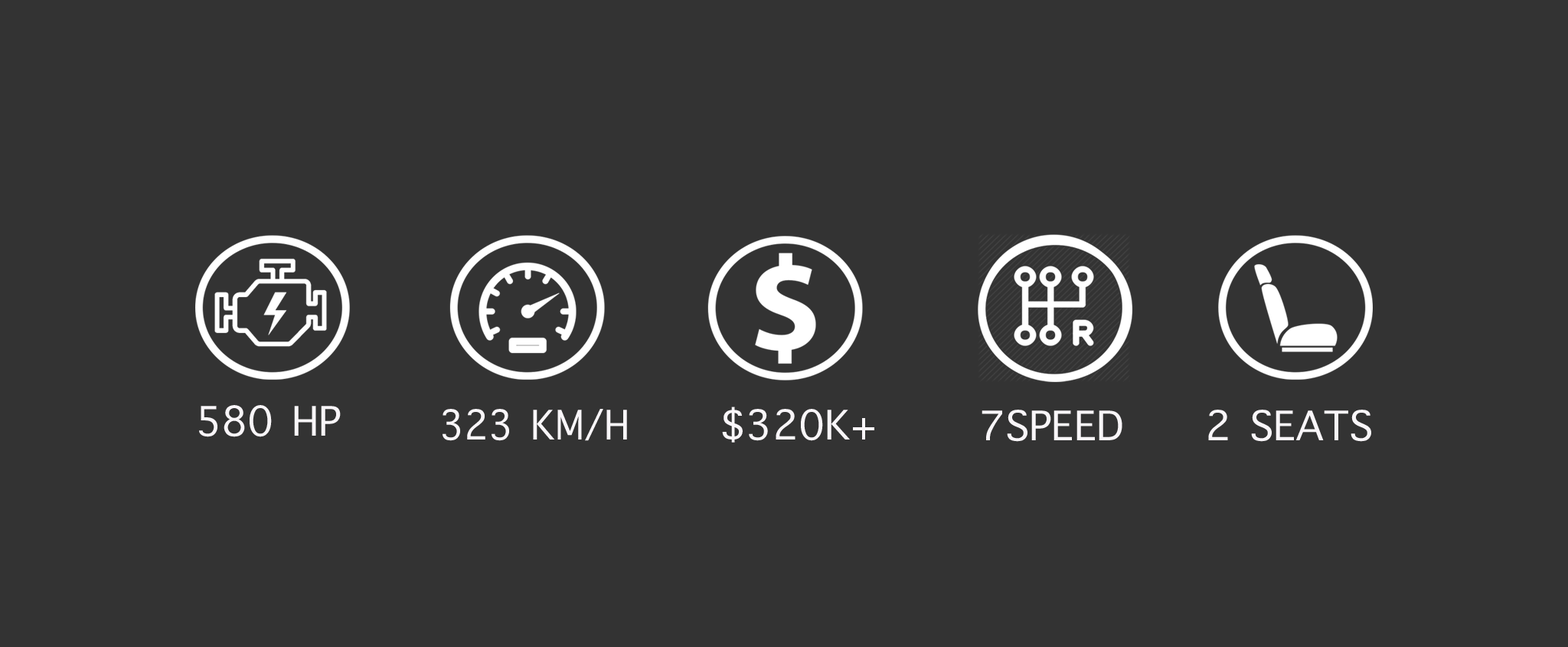
<style>
.page{position:relative;width:1568px;height:647px;background:#333333}
.page>*{position:absolute;margin:0}
.t1{font:55.1px "AppleSymbols";color:#f9f6f9}
.t2{font:55.1px "AppleSymbols";color:#f9f6f9;scale:0.94 1}
</style>
<div class="page">
<p class="t1" style="left:199px;top:405px;width:142px;height:32px">580 HP</p>
<p class="t2" style="left:443px;top:409px;width:184px;height:32px">323 KM/H</p>
<p class="t1" style="left:722px;top:407px;width:152px;height:36px">$320K+</p>
<p class="t1" style="left:982px;top:410px;width:140px;height:32px">7SPEED</p>
<p class="t1" style="left:1208px;top:410px;width:163px;height:32px">2 SEATS</p>
</div>
